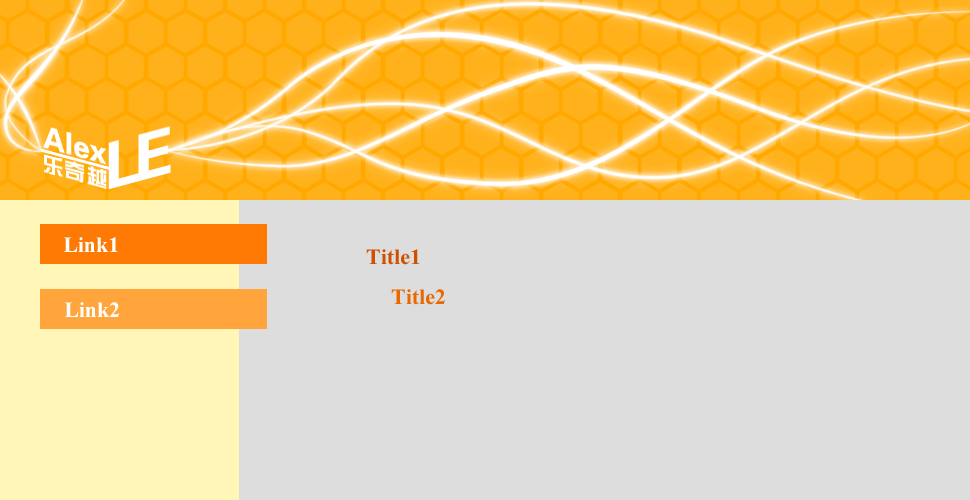
<style>
.page{position:relative;width:970px;height:500px;background:#dddddd}
.page>*{position:absolute;margin:0}
.t1{font:22px "TimesNewRomanPS-BoldMT";color:#ffffff}
.t2{font:22px "TimesNewRomanPS-BoldMT";color:#ce5100}
.t3{font:22px "TimesNewRomanPS-BoldMT";color:#e96800}
</style>
<div class="page">
<p class="t1" style="left:63px;top:237px;width:55px;height:15px">Link1</p>
<p class="t2" style="left:366px;top:249px;width:54px;height:16px">Title1</p>
<p class="t3" style="left:391px;top:289px;width:54px;height:16px">Title2</p>
<p class="t1" style="left:64px;top:302px;width:55px;height:15px">Link2</p>
</div>
